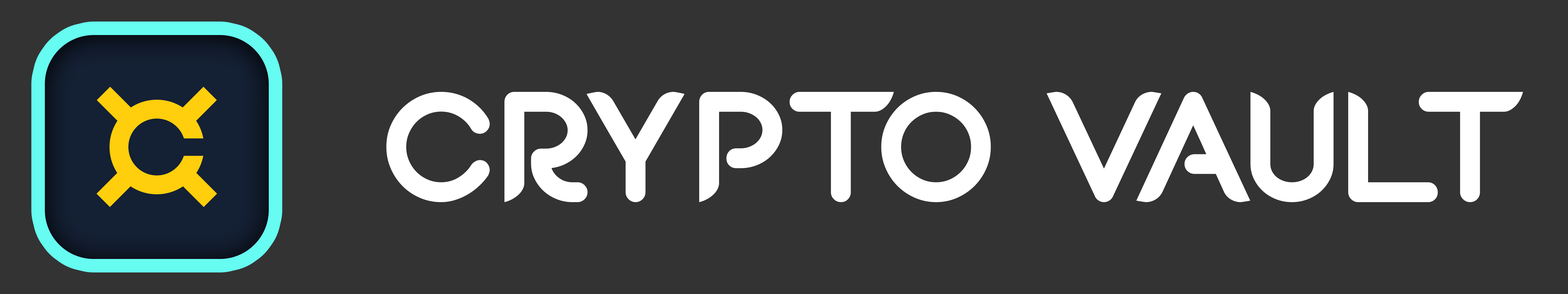
<style>
.page{position:relative;width:1568px;height:294px;background:#333333}
.page>*{position:absolute;margin:0}
.t1{font:147px "SeanHenrichATF-ExtraBold";color:#ffffff}
.t2{font:147px "SeanHenrichATF-ExtraBold";letter-spacing:-0.05em;color:#ffffff}
</style>
<div class="page">
<p class="t1" style="left:386px;top:92px;width:1137px;height:110px">CRY<span class="t2">PT</span>O VAULT</p>
</div>
